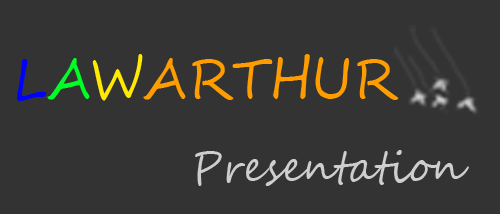
<style>
.page{position:relative;width:500px;height:214px;background:#333333}
.page>*{position:absolute;margin:0}
.t1{font:55.1px "SegoeScript";color:#ff9c00;scale:0.94 1}
.t2{font:55.1px "SegoeScript";color:#0000ff;scale:0.94 1}
.t3{font:55.1px "SegoeScript";color:#00ff24;scale:0.94 1}
.t4{font:55.1px "SegoeScript";color:#ffea00;scale:0.94 1}
.t5{font:42.9px "SegoeScript";color:#cecece;scale:0.94 1}
</style>
<div class="page">
<p class="t1" style="left:17px;top:54px;width:382px;height:47px"><span class="t2">L</span><span class="t3">A</span><span class="t4">W</span>ARTHUR</p>
<p class="t5" style="left:195px;top:150px;width:274px;height:36px">Presentation</p>
</div>
